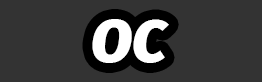
<style>
.page{position:relative;width:262px;height:82px;background:#333333}
.page>*{position:absolute;margin:0}
.t1{font:60px "FiraSans-BlackItalic";color:#ffffff}
</style>
<div class="page">
<p class="t1" style="left:92px;top:19px;width:77px;height:44px">OC</p>
</div>
